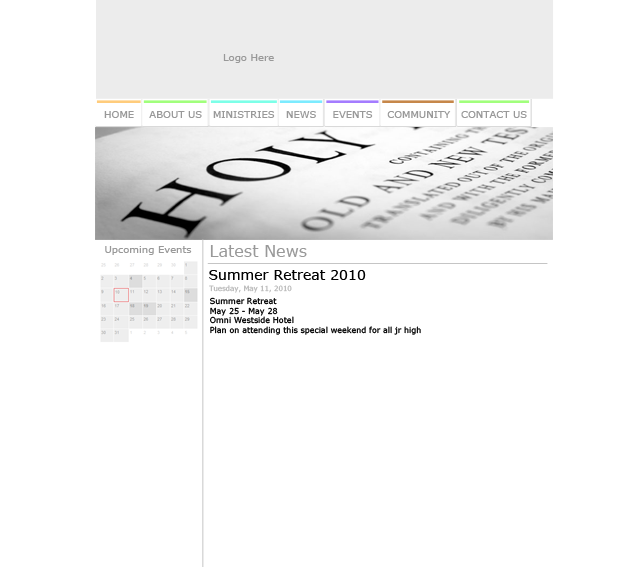
<style>
.page{position:relative;width:640px;height:567px;background:#ffffff}
.page>*{position:absolute;margin:0}
.t1{font:10px "Verdana";color:#999999}
.t2{font:16px "Verdana";color:#999999}
.t3{font:14px "Verdana";color:#000000}
.t4{font:7px "Verdana";color:#b9b9b9}
.t5{font:8px "Verdana";color:#000000}
</style>
<div class="page">
<p class="t1" style="left:223px;top:54px;width:51px;height:9px">Logo Here</p>
<p class="t1" style="left:104px;top:111px;width:30px;height:7px">HOME</p>
<p class="t1" style="left:149px;top:111px;width:53px;height:7px">ABOUT US</p>
<p class="t1" style="left:213px;top:111px;width:62px;height:7px">MINISTRIES</p>
<p class="t1" style="left:286px;top:111px;width:30px;height:7px">NEWS</p>
<p class="t1" style="left:333px;top:111px;width:40px;height:7px">EVENTS</p>
<p class="t1" style="left:387px;top:111px;width:64px;height:7px">COMMUNITY</p>
<p class="t1" style="left:461px;top:111px;width:66px;height:7px">CONTACT US</p>
<p class="t1" style="left:105px;top:246px;width:87px;height:9px">Upcoming Events</p>
<p class="t2" style="left:210px;top:245px;width:97px;height:12px">Latest News</p>
<p class="t3" style="left:209px;top:270px;width:157px;height:10px">Summer Retreat 2010</p>
<p class="t4" style="left:209px;top:285px;width:83px;height:8px">Tuesday, May 11, 2010</p>
<p class="t5" style="left:210px;top:297px;width:211px;height:38px">Summer Retreat<br>May 25 - May 28<br>Omni Westside Hotel<br>Plan on attending this special weekend for all jr high</p>
</div>
